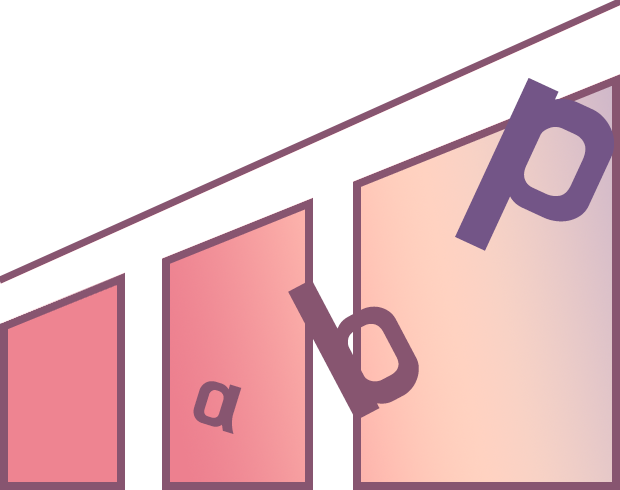
<style>
.page{position:relative;width:620px;height:490px;background:#ffffff}
.page>*{position:absolute;margin:0}
.t1{font:250px "BMHANNA11yrsold";letter-spacing:-0.05em;color:#735587}
.t2{font:200px "BMHANNA11yrsold";letter-spacing:-0.05em;color:#875570}
.t3{font:95px "BMHANNA11yrsold";letter-spacing:-0.05em;color:#875570}
</style>
<div class="page">
<p class="t1" style="left:455px;top:78px;width:159px;height:173px;rotate:25deg">p</p>
<p class="t2" style="left:288px;top:279px;width:131px;height:142px;rotate:-28deg">b</p>
<p class="t3" style="left:193px;top:381px;width:49px;height:53px;rotate:17deg">a</p>
</div>
